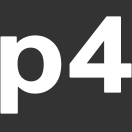
<style>
.page{position:relative;width:132px;height:132px;background:#333333}
.page>*{position:absolute;margin:0}
.t1{font:106.3px "Arial-BoldMT";color:#ffffff;font-weight:bold;scale:1.11 1}
</style>
<div class="page">
<p class="t1" style="left:0px;top:16px;width:132px;height:98px">p4</p>
</div>
